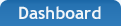
<style>
.page{position:relative;width:121px;height:26px}
.page>*{position:absolute;margin:0}
.t1{font:17px "TrebuchetMS-Bold";color:#f1f5f8}
</style>
<div class="page">
<p class="t1" style="left:19px;top:6px;width:82px;height:13px">Dashboard</p>
</div>
